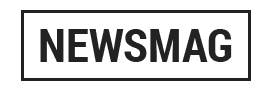
<style>
.page{position:relative;width:272px;height:90px;background:#ffffff}
.page>*{position:absolute;margin:0}
.t1{font:46px "RobotoCondensed-Bold";color:#222222}
</style>
<div class="page">
<p class="t1" style="left:40px;top:29px;width:192px;height:33px">NEWSMAG</p>
</div>
